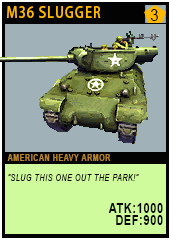
<style>
.page{position:relative;width:170px;height:241px;background:#a0b2b8}
.page>*{position:absolute;margin:0}
.t1{font:15.1px "AdobeHeitiStd-Regular";letter-spacing:0.08em;color:#ffb800;text-transform:uppercase;scale:0.86 1}
.t2{font:17.4px "ArialMT";letter-spacing:0.08em;color:#040402;text-transform:uppercase;scale:0.86 1}
.t3{font:9.3px/20.2px "Arial-ItalicMT";letter-spacing:0.08em;color:#040301;text-transform:uppercase;scale:0.76 1}
.t4{font:9.3px/20.2px "Arial-BoldMT";letter-spacing:0.08em;color:#b4832c;text-transform:uppercase;scale:0.76 1}
.t5{font:13.9px/12px "Arial-BoldMT";letter-spacing:0.08em;color:#050606;text-transform:uppercase;scale:0.76 1}
</style>
<div class="page">
<p class="t1" style="left:7px;top:6px;width:94px;height:12px">m36 Slugger</p>
<p class="t2" style="left:150px;top:9px;width:8px;height:12px">3</p>
<p class="t3" style="left:7px;top:154px;width:156px;height:71px"><span class="t4">American Heavy Armor<br></span>“Slug this one out the park!”<br><br><span class="t5">atk:1000<br>def:900</span></p>
</div>
